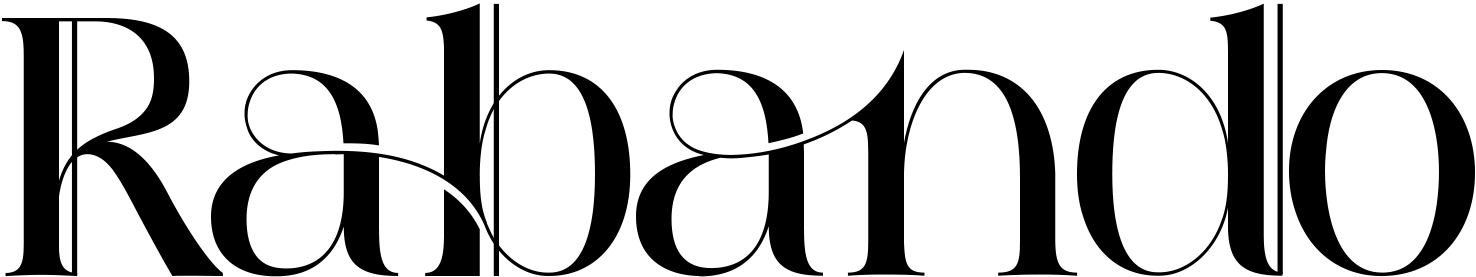
<style>
.page{position:relative;width:1476px;height:277px;background:#ffffff}
.page>*{position:absolute;margin:0}
.t1{font:303.2px "against-Regular";letter-spacing:-0.09em;color:#010101;scale:0.91 1}
.t2{font:303.2px "against-Regular";letter-spacing:-0.075em;color:#010101;scale:0.91 1}
.t3{font:303.2px "against-Regular";letter-spacing:-0.055em;color:#010101;scale:0.91 1}
.t4{font:303.2px "against-Regular";letter-spacing:-0.13em;color:#010101;scale:0.91 1}
.t5{font:303.2px "against-Regular";letter-spacing:-0.07em;color:#010101;scale:0.91 1}
.t6{font:303.2px "against-Regular";letter-spacing:-0.05em;color:#010101;scale:0.91 1}
</style>
<div class="page">
<p class="t1" style="left:1px;top:3px;width:1474px;height:274px">R<span class="t2">a</span><span class="t3">b</span><span class="t4">a</span><span class="t5">n</span><span class="t6">d</span>o</p>
</div>
